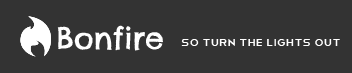
<style>
.page{position:relative;width:352px;height:73px;background:#333333}
.page>*{position:absolute;margin:0}
.t1{font:30px "ChelseaMarket-Regular";color:#ffffff}
.t2{font:14px "Telegrafico";color:#ffffff}
</style>
<div class="page">
<p class="t1" style="left:57px;top:25px;width:106px;height:26px">Bonfire</p>
<p class="t2" style="left:181px;top:39px;width:159px;height:7px">so turn the lights out</p>
</div>
